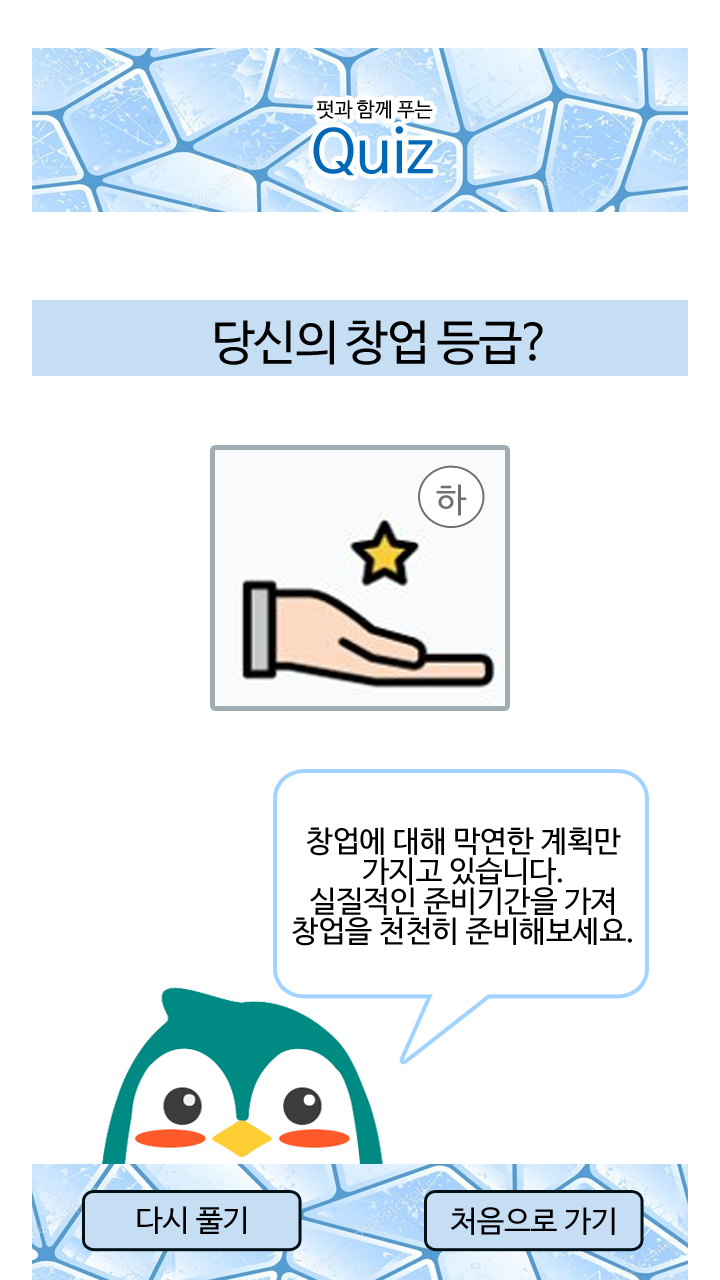
<style>
.page{position:relative;width:720px;height:1280px;background:#ffffff}
.page>*{position:absolute;margin:0}
.t1{font:20px/24px "NanumBarunGothic";color:#000000}
.t2{font:20px/26px "NanumBarunGothic";color:#000000}
.t3{font:60px/24px "NanumBarunGothic";color:#0068b7}
.t4{font:48px "NanumBarunGothic";letter-spacing:-0.03em;color:#000000}
.t5{font:34px "NanumBarunGothic";color:#707070}
.t6{font:30px/30px "NanumBarunGothic";color:#000000}
.t7{font:30px "NanumBarunGothic";color:#000000}
</style>
<div class="page">
<p class="t1" style="left:313px;top:100px;width:120px;height:76px;text-align:center"><span class="t2">  </span>펏과 함께 푸는 <br><span class="t3">Quiz</span></p>
<p class="t4" style="left:215px;top:320px;width:328px;height:45px">당신의 창업 등급?</p>
<p class="t5" style="left:436px;top:484px;width:31px;height:32px">하</p>
<p class="t6" style="left:292px;top:827px;width:340px;height:119px;text-align:center">창업에 대해 막연한 계획만<br>가지고 있습니다.<br>실질적인 준비기간을 가져<br>창업을 천천히 준비해보세요.</p>
<p class="t7" style="left:137px;top:1206px;width:109px;height:28px">다시 풀기</p>
<p class="t7" style="left:450px;top:1207px;width:165px;height:28px">처음으로 가기</p>
</div>
